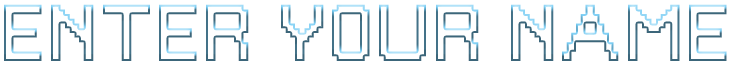
<style>
.page{position:relative;width:731px;height:65px;background:#ffffff}
.page>*{position:absolute;margin:0}
.t1{font:75px "PixelGameFont";text-transform:uppercase}
</style>
<div class="page">
<p class="t1" style="left:4px;top:4px;width:723px;height:57px">enter your name</p>
</div>
